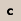
<style>
.page{position:relative;width:21px;height:21px;background:#d9cdc1}
.page>*{position:absolute;margin:0}
.t1{font:9px "Tahoma-Bold";color:#000000}
</style>
<div class="page">
<p class="t1" style="left:7px;top:8px;width:6px;height:7px">C</p>
</div>
